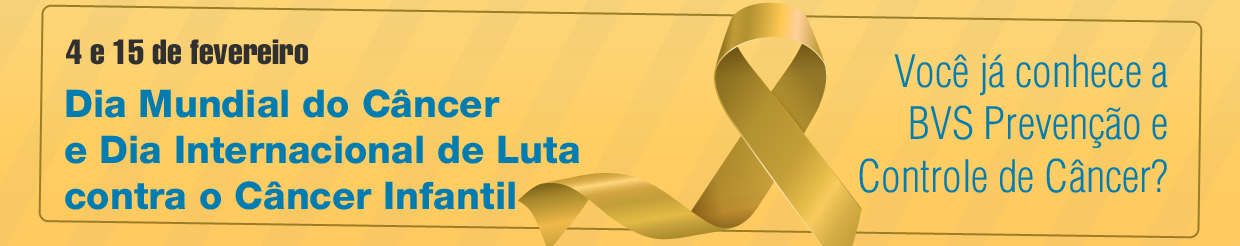
<style>
.page{position:relative;width:1240px;height:246px}
.page>*{position:absolute;margin:0}
.t1{font:34.5px "Helvetica-Compressed";color:#303030}
.t2{font:43.8px "Helvetica-CondensedLight";color:#007cb0}
.t3{font:38px "Helvetica85-Heavy";color:#007cb0}
</style>
<div class="page">
<p class="t1" style="left:66px;top:39px;width:242px;height:26px">4 e 15 de fevereiro</p>
<p class="t2" style="left:859px;top:54px;width:309px;height:139px;text-align:right">Você já conhece a<br>BVS Prevenção e<br>Controle de Câncer?</p>
<p class="t3" style="left:65px;top:89px;width:515px;height:121px">Dia Mundial do Câncer<br>e Dia Internacional de Luta<br>contra o Câncer Infantil</p>
</div>
